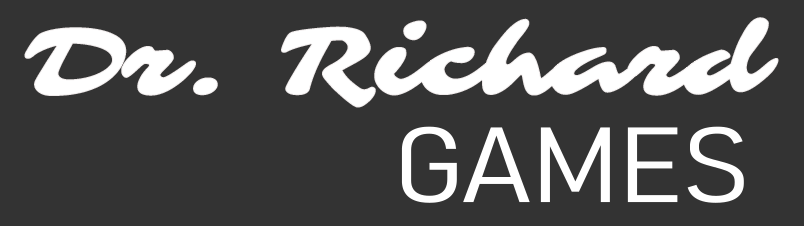
<style>
.page{position:relative;width:804px;height:226px;background:#333333}
.page>*{position:absolute;margin:0}
.t1{font:100px "Sarina-Regular";color:#ffffff}
.t2{font:105.2px "Bahnschrift-LightSemiCondensed";color:#ffffff;scale:1.24 1}
</style>
<div class="page">
<p class="t1" style="left:24px;top:17px;width:755px;height:91px">Dr. Richard</p>
<p class="t2" style="left:401px;top:126px;width:343px;height:77px">GAMES</p>
</div>
